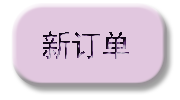
<style>
.page{position:relative;width:180px;height:100px;background:#e1c7df}
.page>*{position:absolute;margin:0}
.t1{font:30px "SimHei"}
</style>
<div class="page">
<p class="t1" style="left:43px;top:31px;width:86px;height:28px">新订单</p>
</div>
